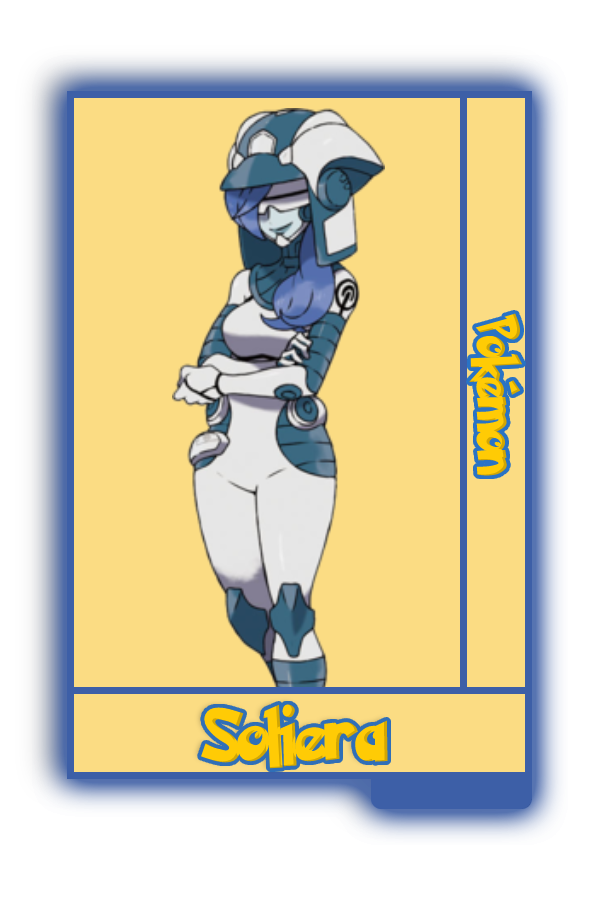
<style>
.page{position:relative;width:600px;height:900px;background:#fbdc83}
.page>*{position:absolute;margin:0}
.t1{font:48.8px "PokemonSolidNormal";color:#ffcb05;scale:0.8 1}
.t2{font:60.1px "PokemonSolidNormal";color:#ffcb05;scale:0.96 1}
</style>
<div class="page">
<p class="t1" style="left:469px;top:313px;width:54px;height:163px;rotate:90deg">Pokémon</p>
<p class="t2" style="left:200px;top:704px;width:188px;height:65px">Soliera</p>
</div>
